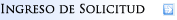
<style>
.page{position:relative;width:177px;height:20px}
.page>*{position:absolute;margin:0}
.t1{font:12px "TrajanPro-Regular";color:#050505}
</style>
<div class="page">
<p class="t1" style="left:1px;top:3px;width:144px;height:11px">Ingreso de Solicitud</p>
</div>
